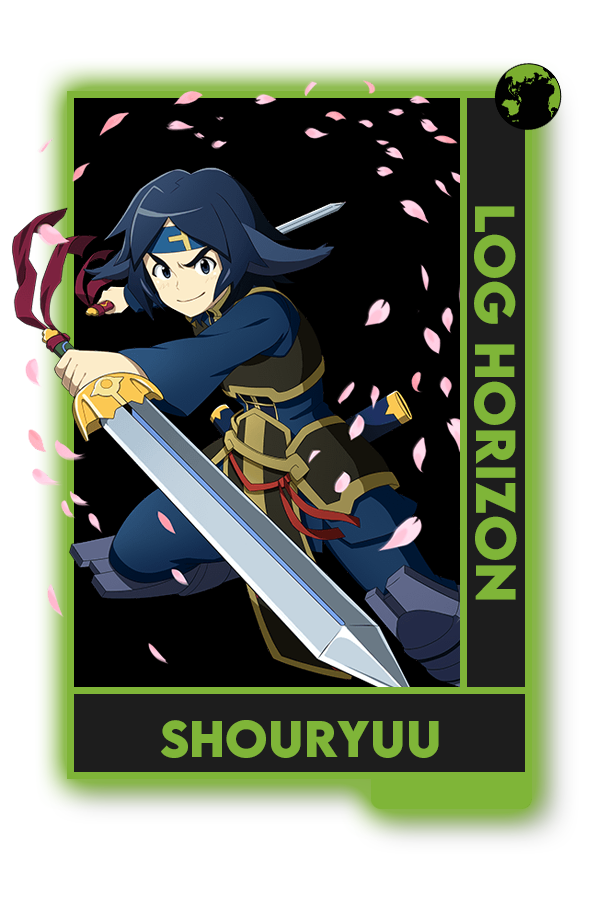
<style>
.page{position:relative;width:600px;height:900px;background:#ffffff}
.page>*{position:absolute;margin:0}
.t1{font:50px "LEMONMILK-Bold";color:#7fad41}
.t2{font:45.8px "LEMONMILK-Bold";color:#7fad41}
</style>
<div class="page">
<p class="t1" style="left:474px;top:206px;width:43px;height:394px;rotate:90deg">Log Horizon</p>
<p class="t2" style="left:161px;top:720px;width:278px;height:38px">Shouryuu</p>
</div>
